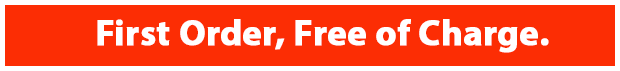
<style>
.page{position:relative;width:620px;height:71px;background:#fc2d04}
.page>*{position:absolute;margin:0}
.t1{font:36px "MyriadPro-Bold";color:#ffffff;font-weight:bold}
</style>
<div class="page">
<p class="t1" style="left:97px;top:19px;width:452px;height:34px">First Order, Free of Charge.</p>
</div>
